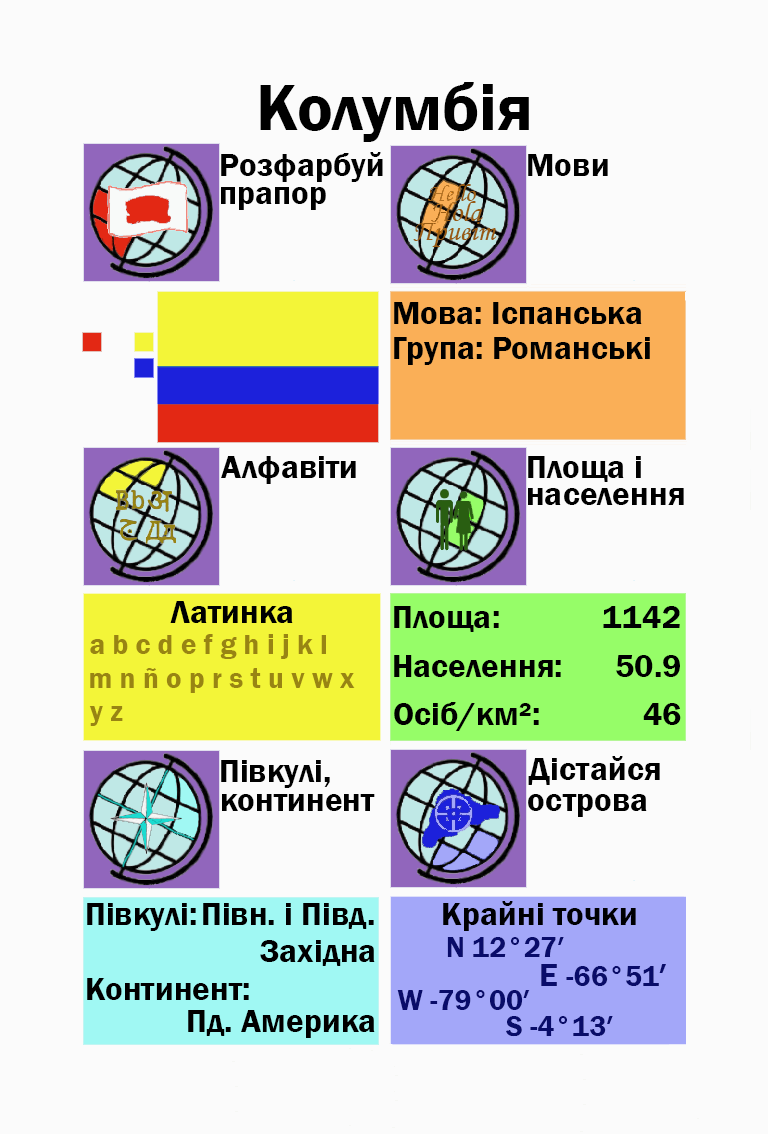
<style>
.page{position:relative;width:768px;height:1134px;background:#fbfbfb}
.page>*{position:absolute;margin:0}
.t1{font:66.7px "FranklinGothic-Demi";color:#000000}
.t2{font:33.3px "FranklinGothic-Demi";color:#000000}
.t3{font:33.3px "FranklinGothic-Demi";color:#000003}
.t4{font:29.2px "FranklinGothic-Demi";color:#988413}
.t5{font:29.2px "FranklinGothic-Demi";color:#090c69}
.t6{font:33.3px "FranklinGothic-Demi";color:#090c69}
</style>
<div class="page">
<p class="t1" style="left:260px;top:82px;width:269px;height:60px">Колумбія</p>
<p class="t2" style="left:221px;top:152px;width:162px;height:30px">Розфарбуй</p>
<p class="t2" style="left:528px;top:154px;width:80px;height:22px">Мови</p>
<p class="t2" style="left:221px;top:187px;width:105px;height:23px">прапор</p>
<p class="t2" style="left:394px;top:302px;width:248px;height:22px">Мова: Іспанська</p>
<p class="t2" style="left:394px;top:337px;width:256px;height:28px">Група: Романські</p>
<p class="t2" style="left:221px;top:456px;width:135px;height:28px">Алфавіти</p>
<p class="t2" style="left:528px;top:456px;width:113px;height:26px">Площа і</p>
<p class="t2" style="left:528px;top:488px;width:156px;height:17px">населення</p>
<p class="t2" style="left:170px;top:601px;width:123px;height:22px">Латинка</p>
<p class="t2" style="left:394px;top:606px;width:105px;height:26px">Площа:</p>
<p class="t3" style="left:603px;top:606px;width:77px;height:22px">1142</p>
<p class="t4" style="left:90px;top:634px;width:236px;height:25px">a b c d e f g h i j k l</p>
<p class="t2" style="left:394px;top:655px;width:167px;height:22px">Населення:</p>
<p class="t2" style="left:616px;top:655px;width:64px;height:22px">50.9</p>
<p class="t4" style="left:90px;top:668px;width:265px;height:25px">m n ñ o p r s t u v w x</p>
<p class="t2" style="left:394px;top:702px;width:145px;height:29px">Осіб/км²:</p>
<p class="t4" style="left:89px;top:706px;width:34px;height:20px">y z</p>
<p class="t2" style="left:643px;top:703px;width:38px;height:22px">46</p>
<p class="t2" style="left:221px;top:760px;width:109px;height:28px">Півкулі,</p>
<p class="t2" style="left:528px;top:756px;width:132px;height:29px">Дістайся</p>
<p class="t2" style="left:222px;top:794px;width:153px;height:17px">континент</p>
<p class="t2" style="left:528px;top:794px;width:119px;height:23px">острова</p>
<p class="t2" style="left:87px;top:903px;width:109px;height:28px">Півкулі:</p>
<p class="t2" style="left:203px;top:903px;width:171px;height:26px">Півн. і Півд.</p>
<p class="t3" style="left:443px;top:901px;width:193px;height:30px">Крайні точки</p>
<p class="t2" style="left:260px;top:940px;width:115px;height:26px">Західна</p>
<p class="t5" style="left:447px;top:937px;width:117px;height:20px">N 12°27′</p>
<p class="t5" style="left:541px;top:964px;width:125px;height:22px"><span class="t6">E </span>-66°51<span class="t6">′</span></p>
<p class="t2" style="left:87px;top:978px;width:162px;height:22px">Континент:</p>
<p class="t5" style="left:397px;top:990px;width:133px;height:20px">W -79°00′</p>
<p class="t2" style="left:188px;top:1010px;width:187px;height:28px">Пд. Америка</p>
<p class="t5" style="left:506px;top:1016px;width:107px;height:21px">S -4°13′</p>
</div>
